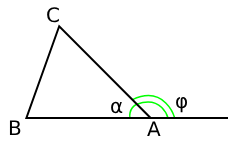
<style>
.page{position:relative;width:242px;height:146px;background:#ffffff}
.page>*{position:absolute;margin:0}
.t1{font:20px "DejaVuSans";color:#000000}
</style>
<div class="page">
<p class="t1" style="left:47px;top:7px;width:12px;height:16px">C</p>
<p class="t1" style="left:111px;top:101px;width:12px;height:13px">α</p>
<p class="t1" style="left:176px;top:96px;width:12px;height:17px">φ</p>
<p class="t1" style="left:9px;top:120px;width:12px;height:15px">B</p>
<p class="t1" style="left:147px;top:121px;width:14px;height:15px">A</p>
</div>
